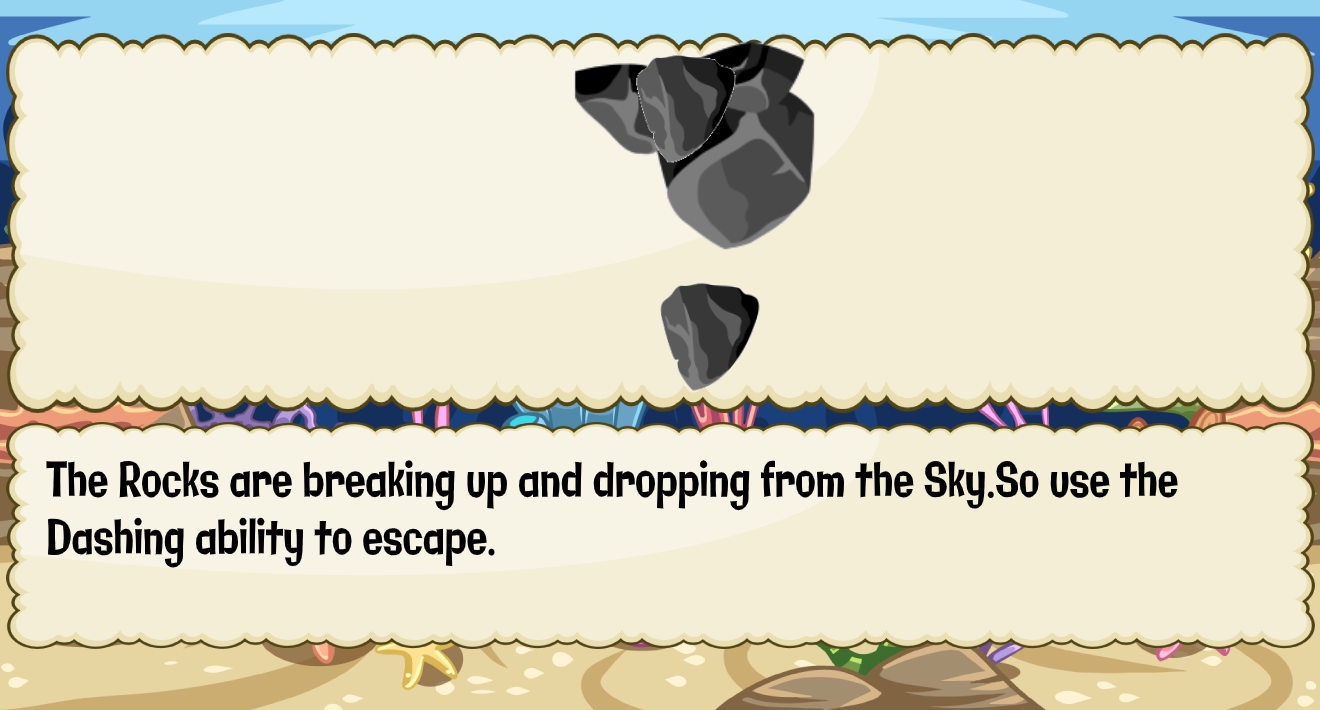
<style>
.page{position:relative;width:1320px;height:710px;background:#f4eed7}
.page>*{position:absolute;margin:0}
.t1{font:47.9px "Galindo-Regular";color:#000000;scale:0.71 1}
</style>
<div class="page">
<p class="t1" style="left:46px;top:460px;width:1132px;height:108px">The Rocks are breaking up and dropping from the Sky.So use the <br>Dashing ability to escape.</p>
</div>
